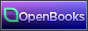
<style>
.page{position:relative;width:88px;height:31px}
.page>*{position:absolute;margin:0}
.t1{font:12px "Metropolis-SemiBold"}
</style>
<div class="page">
<p class="t1" style="left:19px;top:12px;width:66px;height:11px">OpenBooks</p>
</div>
